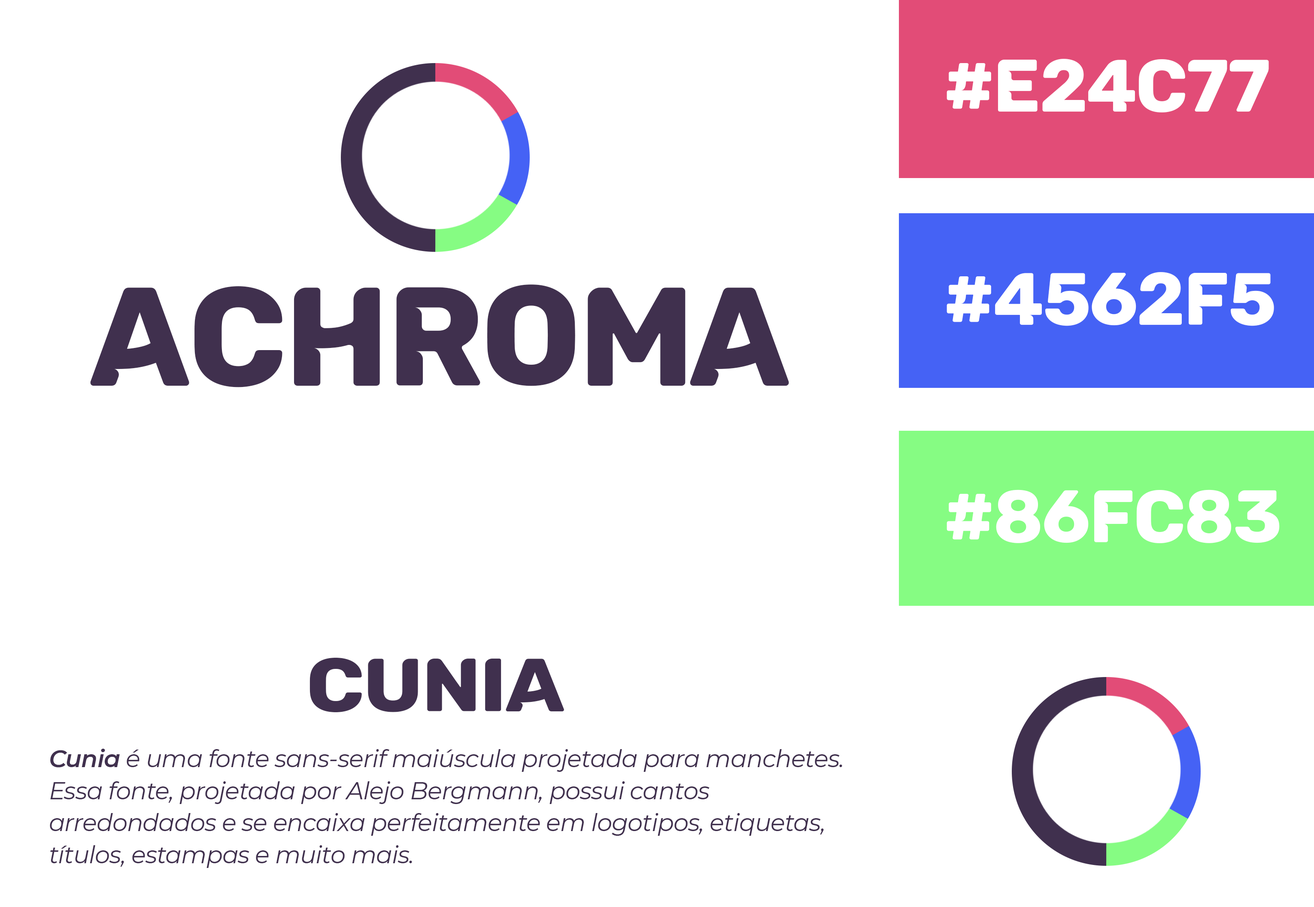
<style>
.page{position:relative;width:1314px;height:907px;background:#ffffff}
.page>*{position:absolute;margin:0}
.t1{font:74.2px "Cunia";letter-spacing:-0.02em;color:#ffffff}
.t2{font:140.9px "Cunia";letter-spacing:-0.02em;color:#40304e}
.t3{font:140.9px "Cunia";letter-spacing:-0.04em;color:#40304e}
.t4{font:75.4px "Cunia";letter-spacing:-0.02em;color:#40304e;scale:1.1 1}
.t5{font:24.1px/32.1px "Montserrat-Italic";letter-spacing:-0.02em;color:#40304e}
.t6{font:24.1px/32.1px "Montserrat-SemiBoldItalic";letter-spacing:-0.02em;color:#40304e}
</style>
<div class="page">
<p class="t1" style="left:947px;top:59px;width:322px;height:53px">#e24c77</p>
<p class="t1" style="left:947px;top:272px;width:327px;height:54px">#4562f5</p>
<p class="t2" style="left:90px;top:286px;width:699px;height:102px">achr <span class="t3">   ma</span></p>
<p class="t2" style="left:487px;top:285px;width:88px;height:101px">o</p>
<p class="t1" style="left:947px;top:490px;width:333px;height:53px">#86fc83</p>
<p class="t4" style="left:310px;top:658px;width:254px;height:55px">CUNIA</p>
<p class="t5" style="left:50px;top:749px;width:792px;height:119px"><span class="t6">Cunia </span>é uma fonte sans-serif maiúscula projetada para manchetes.<br>Essa fonte, projetada por Alejo Bergmann, possui cantos <br>arredondados e se encaixa perfeitamente em logotipos, etiquetas, <br>títulos, estampas e muito mais.</p>
</div>
